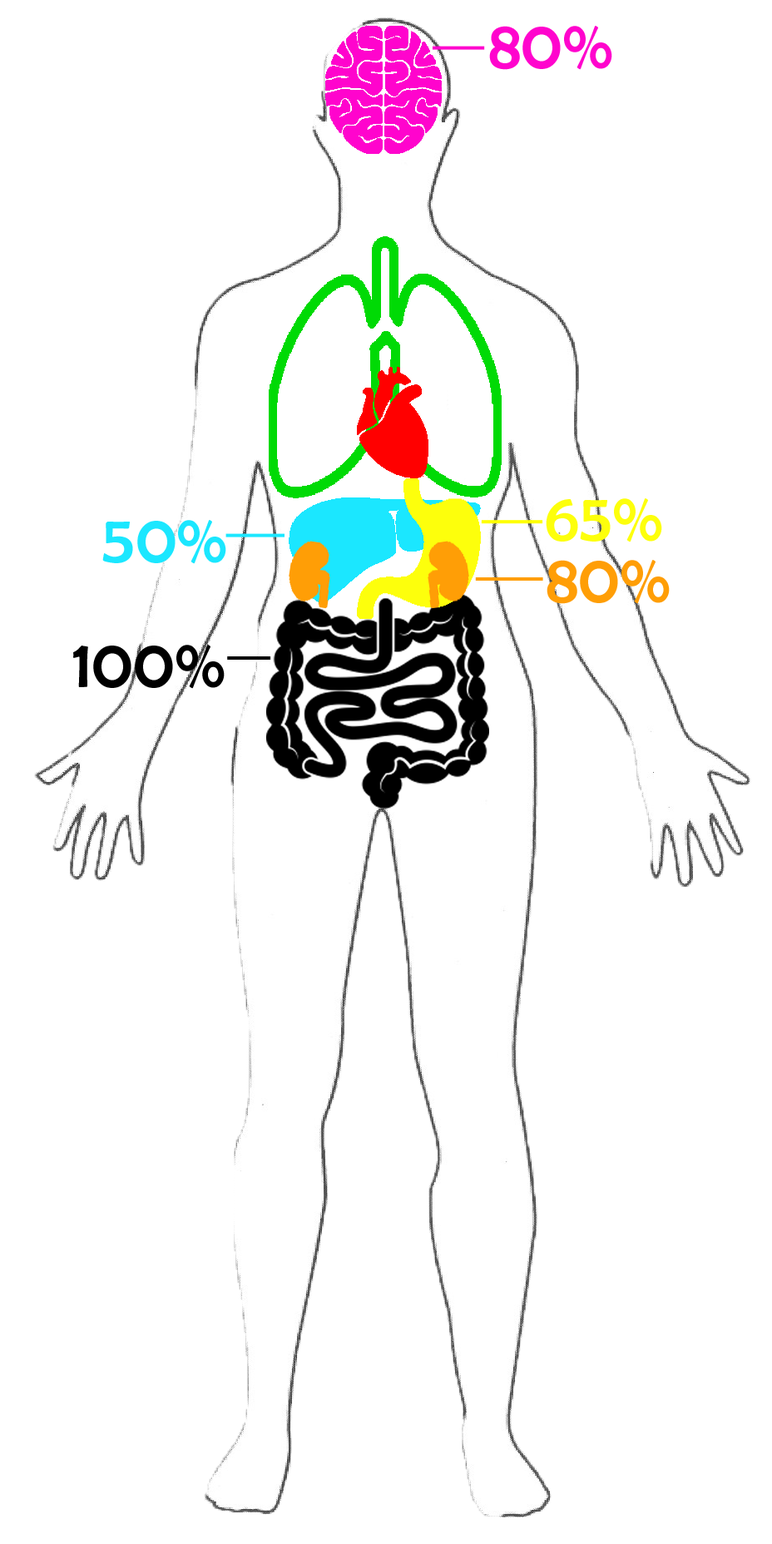
<style>
.page{position:relative;width:772px;height:1544px;background:#ffffff}
.page>*{position:absolute;margin:0}
.t1{font:69.3px "BerlinSansFB-Reg";color:#ff04cd}
.t2{font:69.3px "BerlinSansFB-Reg";color:#fdff0c}
.t3{font:69.3px "BerlinSansFB-Reg";color:#1be7ff}
.t4{font:69.3px "BerlinSansFB-Reg";color:#ff9e06}
.t5{font:69.3px "BerlinSansFB-Reg";color:#000000}
</style>
<div class="page">
<p class="t1" style="left:489px;top:26px;width:123px;height:44px">80%</p>
<p class="t2" style="left:546px;top:498px;width:116px;height:45px">65%</p>
<p class="t3" style="left:102px;top:520px;width:124px;height:44px">50%</p>
<p class="t4" style="left:547px;top:560px;width:123px;height:44px">80%</p>
<p class="t5" style="left:73px;top:645px;width:152px;height:44px">100%</p>
</div>
